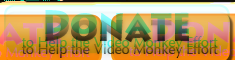
<style>
.page{position:relative;width:235px;height:60px}
.page>*{position:absolute;margin:0}
.t1{font:34px "LithosPro-Black"}
.t2{font:14px "Optima-Regular"}
</style>
<div class="page">
<p class="t1" style="left:45px;top:10px;width:144px;height:26px">Donate</p>
<p class="t2" style="left:22px;top:36px;width:196px;height:15px">to Help the Video Monkey Effort</p>
</div>
